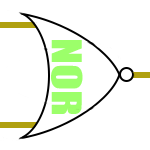
<style>
.page{position:relative;width:150px;height:150px;background:#ffffff}
.page>*{position:absolute;margin:0}
.t1{font:38.1px "Impact";color:#9cff6a;scale:1.26 1}
</style>
<div class="page">
<p class="t1" style="left:51px;top:40px;width:32px;height:74px;rotate:90deg">NOR</p>
</div>
